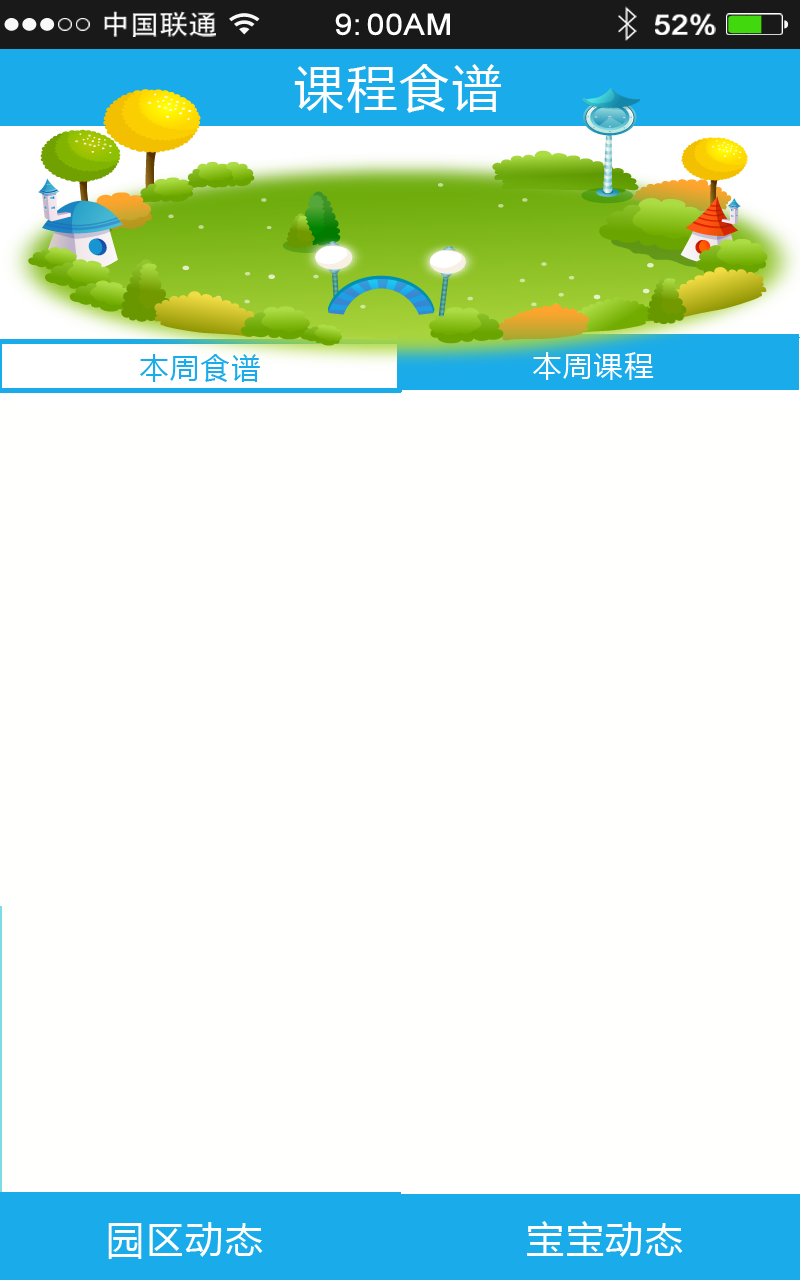
<style>
.page{position:relative;width:800px;height:1280px;background:#fffffe}
.page>*{position:absolute;margin:0}
.t1{font:26.8px "AdobeHeitiStd-Regular";color:#ffffff;scale:1.09 1}
.t2{font:29.2px "ArialMT";color:#ffffff;font-weight:bold;scale:1.09 1}
.t3{font:28px "ArialMT";color:#ffffff;font-weight:bold;scale:1.09 1}
.t4{font:50px "MicrosoftYaHei";letter-spacing:0.05em;color:#ffffff}
.t5{font:29.2px "MicrosoftYaHei";letter-spacing:0.05em;color:#ffffff}
.t6{font:29.2px "MicrosoftYaHei";letter-spacing:0.05em;color:#1aabea}
.t7{font:37.5px "MicrosoftYaHei";letter-spacing:0.05em;color:#fffffe}
</style>
<div class="page">
<p class="t1" style="left:104px;top:11px;width:112px;height:26px">中国联通</p>
<p class="t2" style="left:335px;top:13px;width:115px;height:23px">9:00AM</p>
<p class="t3" style="left:655px;top:13px;width:61px;height:22px">52%</p>
<p class="t4" style="left:294px;top:64px;width:207px;height:49px">课程食谱</p>
<p class="t5" style="left:533px;top:352px;width:121px;height:28px">本周课程</p>
<p class="t6" style="left:140px;top:354px;width:120px;height:28px">本周食谱</p>
<p class="t7" style="left:108px;top:1222px;width:155px;height:37px">园区动态</p>
<p class="t7" style="left:527px;top:1221px;width:156px;height:36px">宝宝动态</p>
</div>
